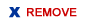
<style>
.page{position:relative;width:85px;height:25px;background:#ffffff}
.page>*{position:absolute;margin:0}
.t1{font:14px "Arial-Black";color:#003399;font-weight:bold}
.t2{font:11.3px "ArialMT";color:#cc0000;font-weight:bold}
</style>
<div class="page">
<p class="t1" style="left:9px;top:7px;width:12px;height:11px">X</p>
<p class="t2" style="left:27px;top:8px;width:50px;height:9px">REMOVE</p>
</div>
